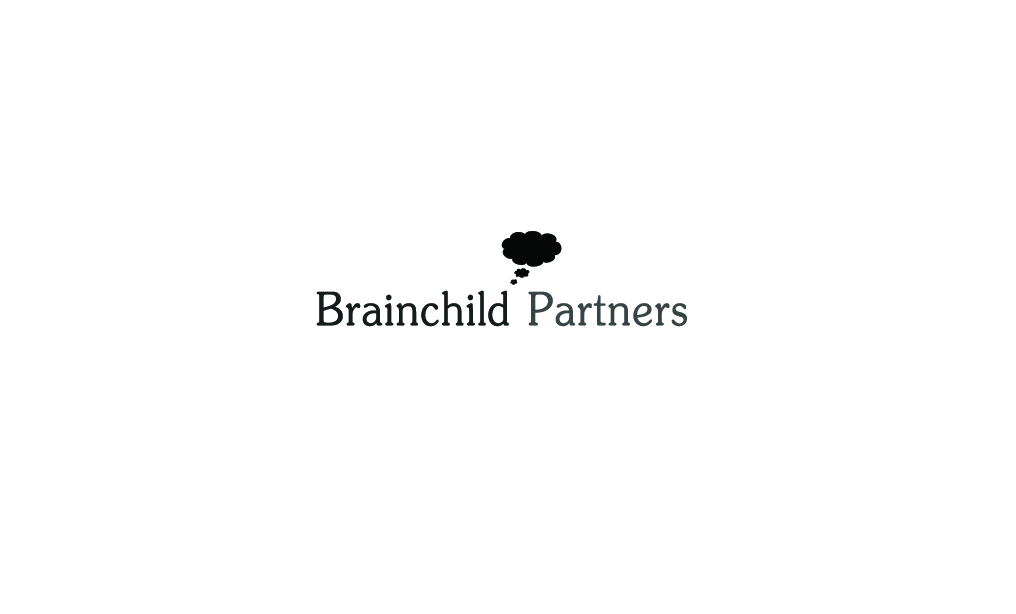
<style>
.page{position:relative;width:1016px;height:614px;background:#ffffff}
.page>*{position:absolute;margin:0}
.t1{font:73px "JasmineUPC";color:#151a1a;font-weight:bold;scale:0.9 1}
.t2{font:73px "JasmineUPC";color:#374344;font-weight:bold;scale:0.9 1}
</style>
<div class="page">
<p class="t1" style="left:316px;top:290px;width:371px;height:37px">Brainchild<span class="t2"> Partners</span></p>
</div>
